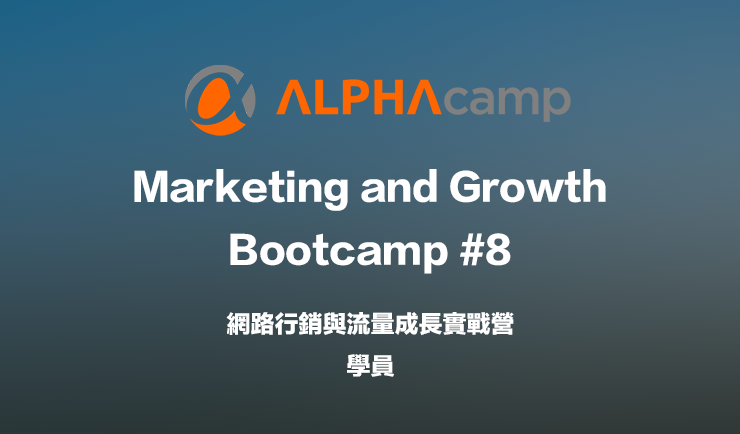
<style>
.page{position:relative;width:740px;height:434px}
.page>*{position:absolute;margin:0}
.t1{font:36px "FZLTTHB--B51-0";color:#ffffff}
.t2{font:24px "FZLTTHB--B51-0";color:#ffffff}
</style>
<div class="page">
<p class="t1" style="left:134px;top:169px;width:472px;height:105px;text-align:center">Marketing and Growth<br>Bootcamp #8</p>
<p class="t2" style="left:226px;top:312px;width:288px;height:65px;text-align:center">網路行銷與流量成長實戰營<br>學員</p>
</div>
